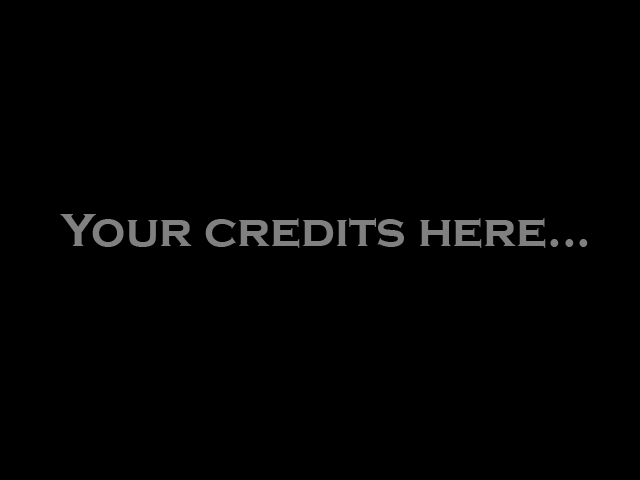
<style>
.page{position:relative;width:640px;height:480px;background:#000000}
.page>*{position:absolute;margin:0}
.t1{font:48px "CopperplateGothic-Bold";color:#808080}
</style>
<div class="page">
<p class="t1" style="left:60px;top:214px;width:528px;height:34px">Your credits here...</p>
</div>
